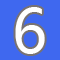
<style>
.page{position:relative;width:60px;height:60px;background:#3f68ef}
.page>*{position:absolute;margin:0}
.t1{font:60px "MicrosoftYaHei";color:#ffffff}
</style>
<div class="page">
<p class="t1" style="left:15px;top:7px;width:30px;height:47px">6</p>
</div>
